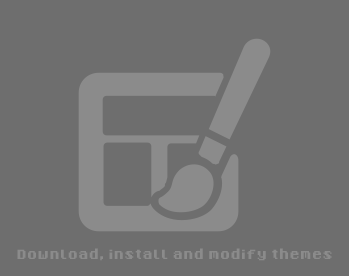
<style>
.page{position:relative;width:349px;height:276px;background:#6e6e6e}
.page>*{position:absolute;margin:0}
.t1{font:21px "8-Bit-Madness";color:#8b8b8b}
</style>
<div class="page">
<p class="t1" style="left:17px;top:248px;width:315px;height:13px">Download, install and modify themes</p>
</div>
